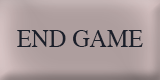
<style>
.page{position:relative;width:160px;height:80px}
.page>*{position:absolute;margin:0}
.t1{font:24px "Times-Roman";color:#1b1f2a;text-transform:uppercase}
</style>
<div class="page">
<p class="t1" style="left:17px;top:30px;width:126px;height:17px">END GAME</p>
</div>
